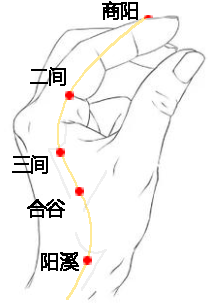
<style>
.page{position:relative;width:208px;height:307px;background:#ffffff}
.page>*{position:absolute;margin:0}
.t1{font:18.7px "MicrosoftYaHei";color:#000000;font-weight:bold}
</style>
<div class="page">
<p class="t1" style="left:102px;top:1px;width:36px;height:19px">商阳</p>
<p class="t1" style="left:30px;top:67px;width:36px;height:19px">二间</p>
<p class="t1" style="left:12px;top:155px;width:36px;height:19px">三间</p>
<p class="t1" style="left:27px;top:199px;width:38px;height:19px">合谷</p>
<p class="t1" style="left:41px;top:252px;width:38px;height:19px">阳溪</p>
</div>
